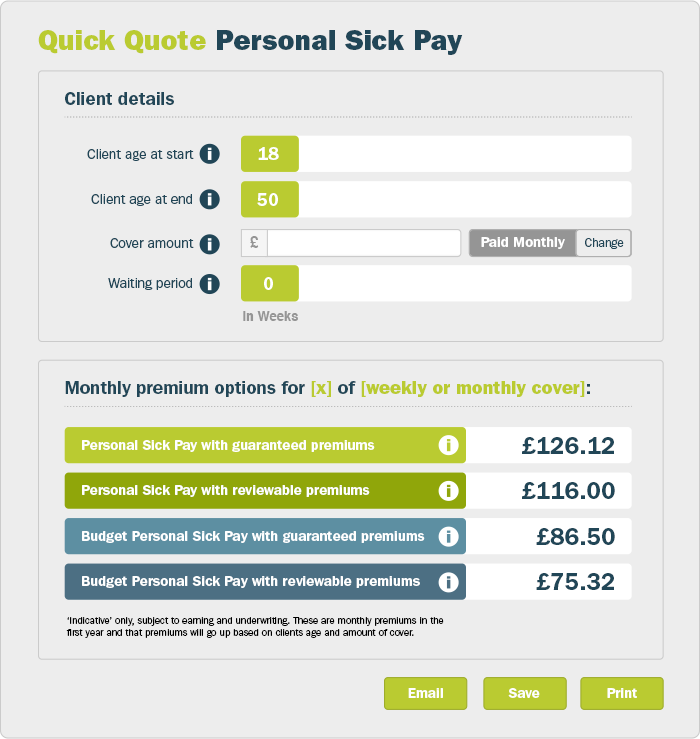
<style>
.page{position:relative;width:700px;height:739px;background:#ededed}
.page>*{position:absolute;margin:0}
.t1{font:28px "FranklinGothicITCbyBT-Heavy";color:#bacb31}
.t2{font:28px "FranklinGothicITCbyBT-Heavy";color:#214657}
.t3{font:18px "FranklinGothicITCbyBT-Demi";color:#214657}
.t4{font:14px "FranklinGothicITCbyBT-Book";color:#214657}
.t5{font:18px "FranklinGothicITCbyBT-Demi";color:#ffffff}
.t6{font:15.7px "Helvetica-Bold";color:#959595}
.t7{font:14px "FranklinGothicITCbyBT-Demi";color:#ffffff}
.t8{font:12px "FranklinGothicITCbyBT-Book";color:#214657}
.t9{font:13px "Helvetica-Bold";color:#959595}
.t10{font:18px "FranklinGothicITCbyBT-Heavy";color:#bacb31}
.t11{font:24px "FranklinGothicITCbyBT-Demi";color:#214657}
.t12{font:10px "FranklinGothicITCbyBT-Book";color:#000000}
</style>
<div class="page">
<p class="t1" style="left:38px;top:30px;width:168px;height:24px">Quick Quote</p>
<p class="t2" style="left:217px;top:30px;width:246px;height:25px">Personal Sick Pay</p>
<p class="t3" style="left:65px;top:92px;width:109px;height:13px">Client details</p>
<p class="t4" style="left:87px;top:149px;width:107px;height:12px">Client age at start</p>
<p class="t5" style="left:258px;top:147px;width:21px;height:13px">18</p>
<p class="t4" style="left:91px;top:194px;width:101px;height:12px">Client age at end</p>
<p class="t5" style="left:257px;top:193px;width:21px;height:13px">50</p>
<p class="t4" style="left:110px;top:238px;width:84px;height:10px">Cover amount</p>
<p class="t6" style="left:250px;top:236px;width:9px;height:12px">£</p>
<p class="t6" style="left:250px;top:236px;width:9px;height:12px">£</p>
<p class="t7" style="left:481px;top:237px;width:84px;height:12px">Paid Monthly</p>
<p class="t8" style="left:585px;top:238px;width:39px;height:11px">Change</p>
<p class="t4" style="left:108px;top:278px;width:84px;height:12px">Waiting period</p>
<p class="t5" style="left:264px;top:277px;width:9px;height:13px">0</p>
<p class="t9" style="left:243px;top:311px;width:55px;height:10px">in Weeks</p>
<p class="t3" style="left:65px;top:381px;width:525px;height:16px">Monthly premium options for <span class="t10">[x] </span>of <span class="t10">[weekly or monthly cover]</span>:</p>
<p class="t11" style="left:522px;top:437px;width:92px;height:17px">£126.12</p>
<p class="t7" style="left:82px;top:440px;width:293px;height:12px">Personal Sick Pay with guaranteed premiums</p>
<p class="t7" style="left:82px;top:485px;width:288px;height:12px">Personal Sick Pay with reviewable premiums</p>
<p class="t11" style="left:522px;top:482px;width:93px;height:17px">£116.00</p>
<p class="t7" style="left:82px;top:531px;width:343px;height:12px">Budget Personal Sick Pay with guaranteed premiums</p>
<p class="t11" style="left:536px;top:528px;width:79px;height:17px">£86.50</p>
<p class="t7" style="left:82px;top:576px;width:338px;height:12px">Budget Personal Sick Pay with reviewable premiums</p>
<p class="t11" style="left:536px;top:573px;width:78px;height:17px">£75.32</p>
<p class="t12" style="left:66px;top:617px;width:378px;height:21px">‘Indicative’ only, subject to earning and underwriting. These are monthly premiums in the first year and that premiums will go up based on clients age and amount of cover.</p>
<p class="t7" style="left:408px;top:688px;width:35px;height:10px">Email</p>
<p class="t7" style="left:508px;top:688px;width:32px;height:10px">Save</p>
<p class="t7" style="left:607px;top:688px;width:30px;height:10px">Print</p>
</div>
